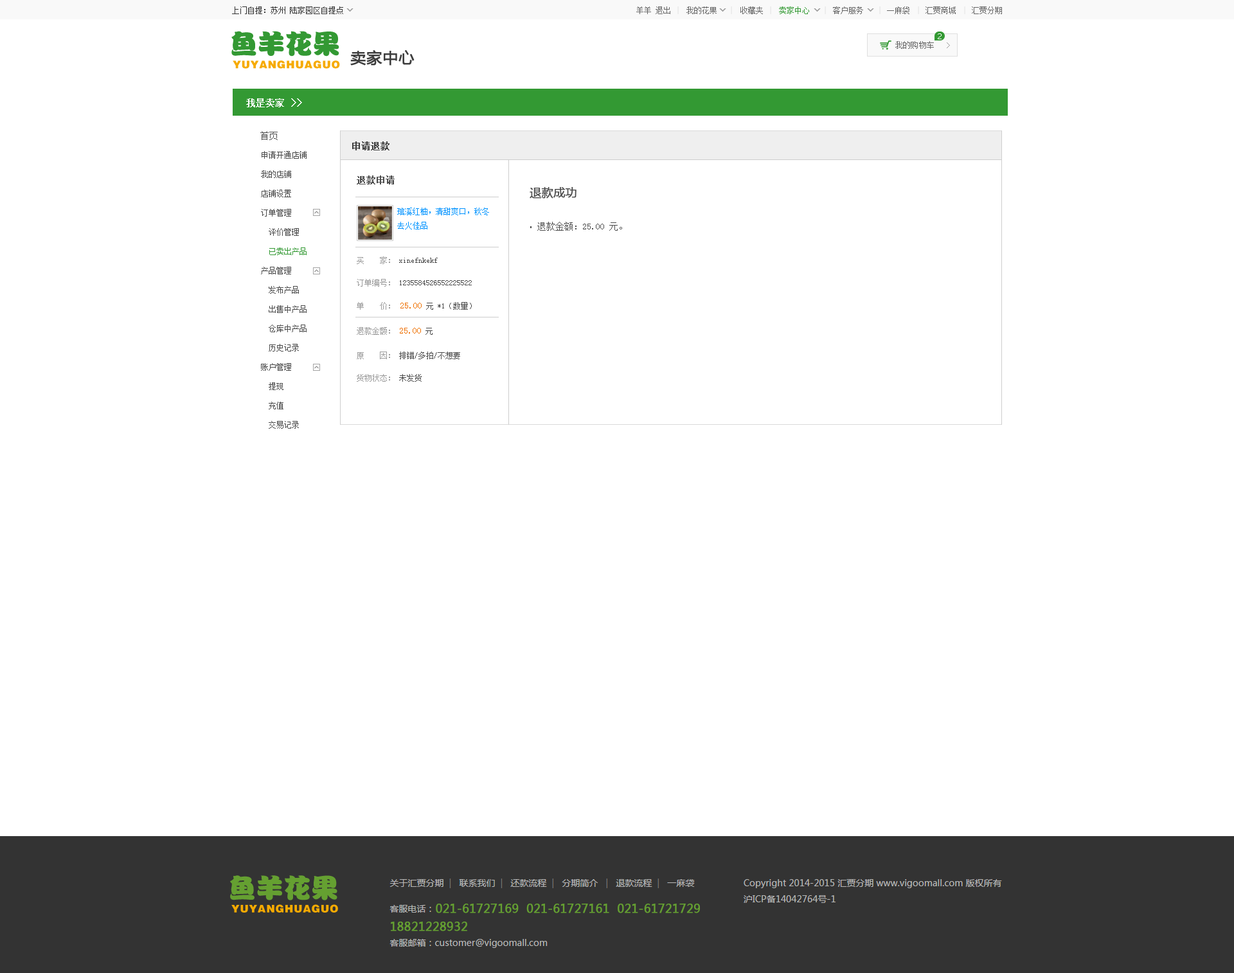
<style>
.page{position:relative;width:1234px;height:973px;background:#ffffff}
.page>*{position:absolute;margin:0}
.t1{font:9px "SimSun";color:#4b4b4b}
.t2{font:9px "SimSun";color:#3e3e3e;font-weight:bold}
.t3{font:7.7px/19.3px "SimSun";color:#4b4b4b}
.t4{font:7.7px/19.3px "SimSun";color:#339933}
.t5{font:9px "SimSun";color:#4b4b4b;font-weight:bold}
.t6{font:11.6px "MicrosoftYaHei";color:#4b4b4b;font-weight:bold}
.t7{font:7.7px/14.1px "SimSun";color:#0094ff}
.t8{font:7.7px/22.5px "SimSun";color:#4b4b4b}
.t9{font:7.7px/22.5px "SimSun";color:#9a9a9a}
.t10{font:7.7px/25.1px "SimSun";color:#9a9a9a}
.t11{font:9px/25.1px "SimSun";color:#ee7000}
.t12{font:7.7px/25.1px "SimSun";color:#4b4b4b}
</style>
<div class="page">
<p class="t1" style="left:260px;top:131px;width:18px;height:9px">首页</p>
<p class="t2" style="left:352px;top:141px;width:38px;height:9px">申请退款</p>
<p class="t3" style="left:261px;top:151px;width:46px;height:278px">申请开通店铺<br>我的店铺<br>店铺设置<br>订单管理<br>  评价管理<br><span class="t4">  已卖出产品<br></span>产品管理<br>  发布产品<br>  出售中产品<br>  仓库中产品<br>  历史记录<br>账户管理<br>  提现<br>  充值<br>  交易记录</p>
<p class="t5" style="left:357px;top:176px;width:38px;height:8px">退款申请</p>
<p class="t6" style="left:530px;top:187px;width:47px;height:12px">退款成功</p>
<p class="t7" style="left:397px;top:208px;width:92px;height:22px">琯溪红柚，清甜爽口，秋冬<br>去火佳品</p>
<p class="t1" style="left:537px;top:222px;width:85px;height:9px">退款金额：25.00 元。</p>
<p class="t8" style="left:357px;top:256px;width:115px;height:126px"><span class="t9">买    家：</span> xinefnkekf<br><span class="t9">订单编号：</span> 1235584526552225522<br><span class="t10">单    价： </span><span class="t11">25.00</span><span class="t12"> 元 *1（数量）<br></span><span class="t10">退款金额： </span><span class="t11">25.00 </span><span class="t12">元<br></span><span class="t9">原    因：</span> 排错/多拍/不想要<br><span class="t9">货物状态：</span> 未发货</p>
</div>
